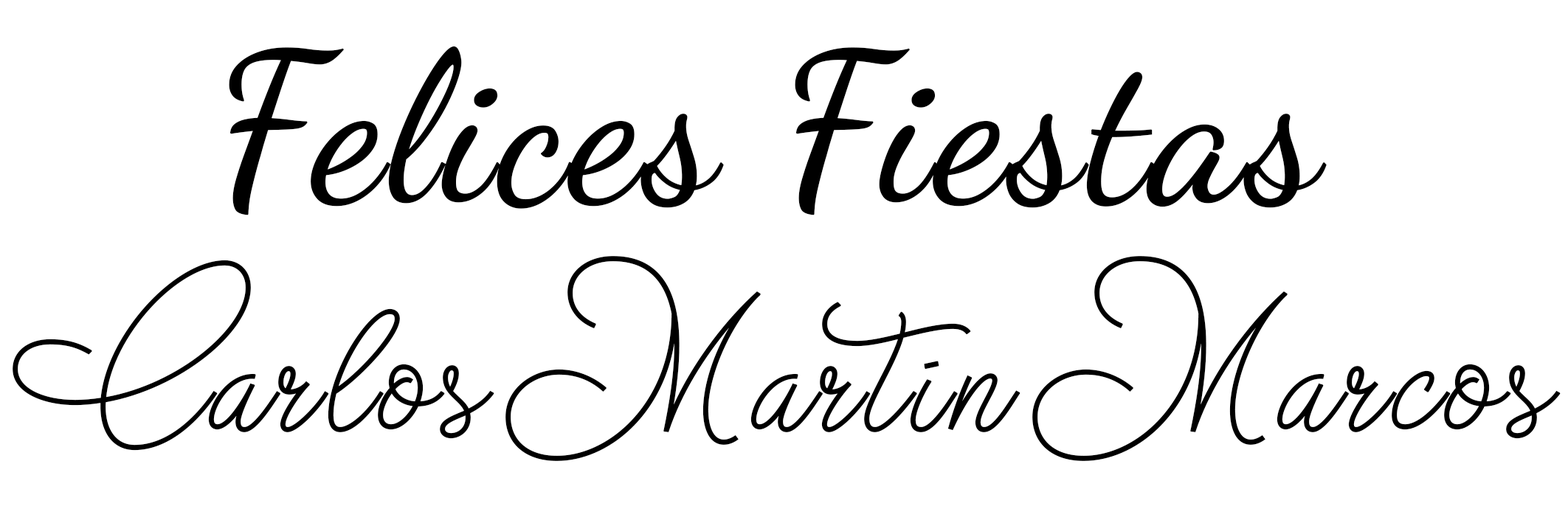
<style>
.page{position:relative;width:1568px;height:523px;background:#ffffff}
.page>*{position:absolute;margin:0}
.t1{font:207.1px "DancingScript-Regular";color:#000000;font-weight:bold}
.t2{font:275.1px "ChristmasWish-monoline";color:#000000;font-weight:bold}
</style>
<div class="page">
<p class="t1" style="left:229px;top:46px;width:1098px;height:169px">Felices Fiestas</p>
<p class="t2" style="left:13px;top:256px;width:1548px;height:205px">Carlos Martin Marcos</p>
</div>
